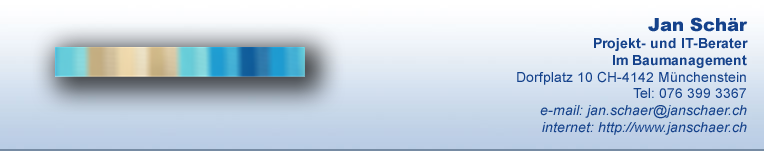
<style>
.page{position:relative;width:764px;height:151px}
.page>*{position:absolute;margin:0}
.t1{font:14px "Arial-ItalicMT";color:#15428b}
.t2{font:14px "ArialMT";color:#15428b}
.t3{font:18px "Arial-Black";color:#15428b}
.t4{font:14px "Arial-BoldMT";color:#15428b}
</style>
<div class="page">
<p class="t1" style="left:517px;top:17px;width:231px;height:118px;text-align:right"><span class="t2">   </span><span class="t3">Jan Schär<br></span><span class="t4">Projekt- und IT-Berater<br>Im Baumanagement<br></span><span class="t2">Dorfplatz 10 CH-4142 Münchenstein<br>Tel: 076 399 3367<br></span>e-mail: jan.schaer@janschaer.ch<br>internet: http://www.janschaer.ch</p>
</div>
